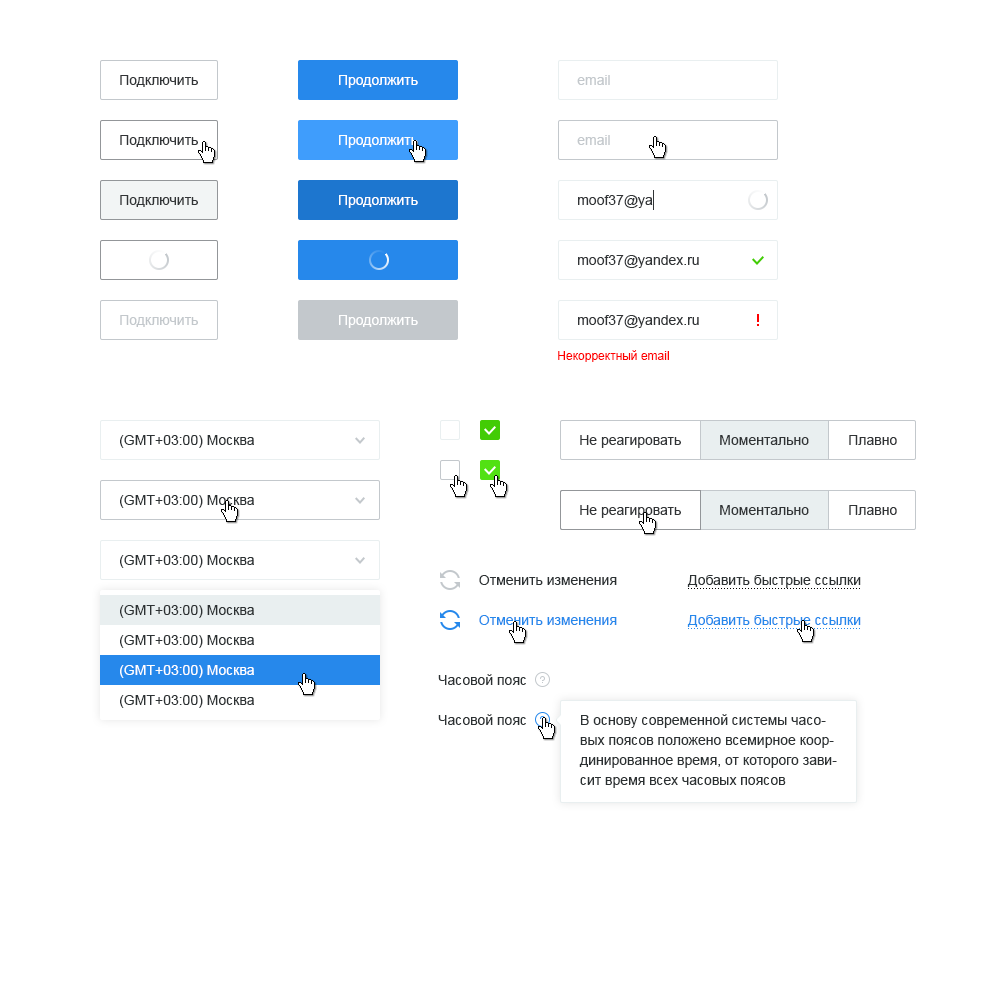
<style>
.page{position:relative;width:1000px;height:1000px;background:#ffffff}
.page>*{position:absolute;margin:0}
.t1{font:14px "ArialMT";color:#313436}
.t2{font:14px "ArialMT";color:#ffffff}
.t3{font:14px "ArialMT";color:#c3c8cc}
.t4{font:12px "ArialMT";color:#ff0000}
.t5{font:14px "ArialMT";color:#2c3133}
.t6{font:14px/30px "ArialMT";color:#2c3133}
.t7{font:14px/30px "ArialMT";color:#ffffff}
.t8{font:14px "ArialMT";color:#2688eb}
.t9{font:14px/20px "ArialMT";color:#2c3133}
</style>
<div class="page">
<p class="t1" style="left:120px;top:75px;width:78px;height:12px">Подключить</p>
<p class="t2" style="left:339px;top:75px;width:79px;height:13px">Продолжить</p>
<p class="t3" style="left:577px;top:75px;width:33px;height:10px">email</p>
<p class="t1" style="left:120px;top:135px;width:78px;height:12px">Подключить</p>
<p class="t2" style="left:339px;top:135px;width:79px;height:13px">Продолжить</p>
<p class="t3" style="left:577px;top:135px;width:33px;height:10px">email</p>
<p class="t1" style="left:120px;top:195px;width:78px;height:12px">Подключить</p>
<p class="t2" style="left:339px;top:195px;width:79px;height:13px">Продолжить</p>
<p class="t1" style="left:578px;top:195px;width:75px;height:13px">moof37@ya</p>
<p class="t1" style="left:578px;top:255px;width:121px;height:13px">moof37@yandex.ru</p>
<p class="t3" style="left:120px;top:315px;width:78px;height:12px">Подключить</p>
<p class="t2" style="left:339px;top:315px;width:79px;height:13px">Продолжить</p>
<p class="t1" style="left:578px;top:315px;width:121px;height:13px">moof37@yandex.ru</p>
<p class="t4" style="left:558px;top:350px;width:111px;height:12px">Некорректный email</p>
<p class="t5" style="left:120px;top:435px;width:134px;height:13px">(GMT+03:00) Москва</p>
<p class="t1" style="left:580px;top:435px;width:101px;height:13px">Не реагировать</p>
<p class="t1" style="left:720px;top:435px;width:89px;height:10px">Моментально</p>
<p class="t1" style="left:849px;top:435px;width:48px;height:10px">Плавно</p>
<p class="t5" style="left:120px;top:495px;width:134px;height:13px">(GMT+03:00) Москва</p>
<p class="t1" style="left:580px;top:505px;width:101px;height:13px">Не реагировать</p>
<p class="t1" style="left:720px;top:505px;width:89px;height:10px">Моментально</p>
<p class="t1" style="left:849px;top:505px;width:48px;height:10px">Плавно</p>
<p class="t5" style="left:120px;top:555px;width:134px;height:13px">(GMT+03:00) Москва</p>
<p class="t5" style="left:479px;top:575px;width:138px;height:10px">Отменить изменения</p>
<p class="t5" style="left:687px;top:575px;width:174px;height:13px">Добавить быстрые ссылки</p>
<p class="t6" style="left:120px;top:605px;width:134px;height:103px">(GMT+03:00) Москва<br>(GMT+03:00) Москва<br><span class="t7">(GMT+03:00) Москва<br></span>(GMT+03:00) Москва</p>
<p class="t8" style="left:479px;top:615px;width:138px;height:10px">Отменить изменения</p>
<p class="t8" style="left:687px;top:615px;width:174px;height:13px">Добавить быстрые ссылки</p>
<p class="t5" style="left:438px;top:674px;width:88px;height:11px">Часовой пояс</p>
<p class="t5" style="left:438px;top:714px;width:88px;height:11px">Часовой пояс</p>
<p class="t9" style="left:579px;top:714px;width:258px;height:74px">В основу современной системы часовых поясов положено всемирное координированное время, от которого зависит время всех часовых поясов</p>
</div>
